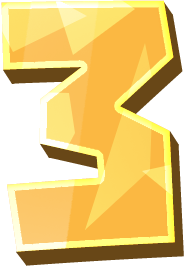
<style>
.page{position:relative;width:185px;height:266px;background:#fbb842}
.page>*{position:absolute;margin:0}
.t1{font:399.6px "Troika"}
</style>
<div class="page">
<p class="t1" style="left:1px;top:0px;width:174px;height:252px">3</p>
</div>
